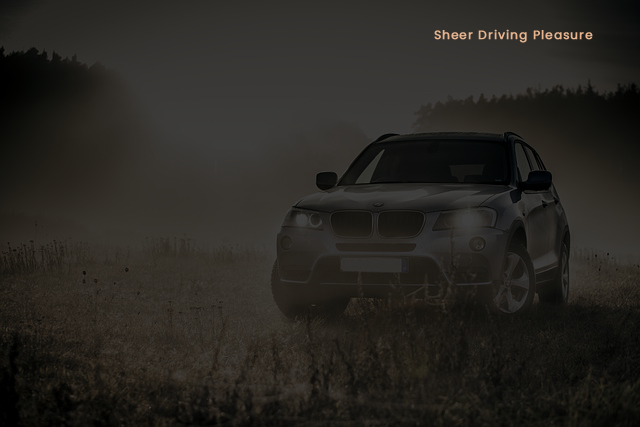
<style>
.page{position:relative;width:640px;height:427px}
.page>*{position:absolute;margin:0}
.t1{font:12px "Poppins-Regular";letter-spacing:0.075em;color:#e8b58f;font-weight:bold}
</style>
<div class="page">
<p class="t1" style="left:434px;top:29px;width:159px;height:14px">Sheer Driving Pleasure</p>
</div>
